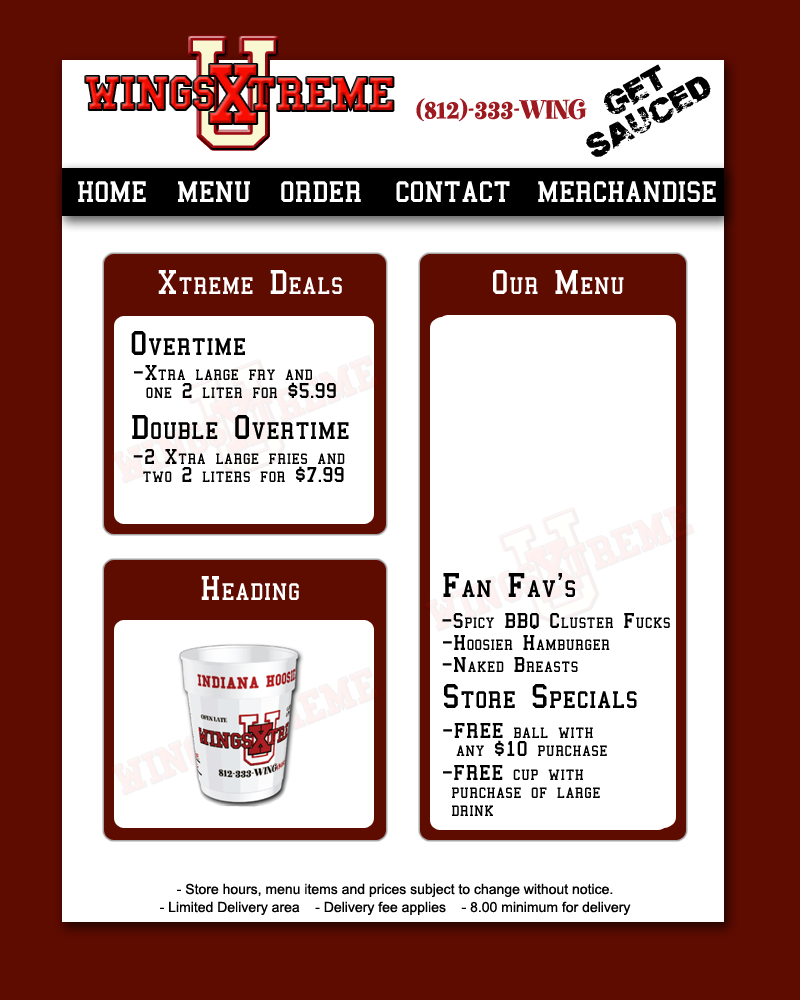
<style>
.page{position:relative;width:800px;height:1000px;background:#ffffff}
.page>*{position:absolute;margin:0}
.t1{font:87.5px "CollegeBold"}
.t2{font:47px/29px "Pdrpt";color:#000000;text-transform:uppercase}
.t3{font:50px "CollegeBold";letter-spacing:-0.05em}
.t4{font:30px "SpumoniLP";color:#9d1a20;text-transform:uppercase}
.t5{font:30px "College";color:#ffffff;text-transform:uppercase}
.t6{font:35px "College";letter-spacing:0.025em;color:#ffffff;font-variant:small-caps}
.t7{font:35px "College";letter-spacing:0.025em;color:#000000;font-variant:small-caps}
.t8{font:22px/18px "College";letter-spacing:0.025em;color:#000000;font-variant:small-caps}
.t9{font:22px "College";letter-spacing:0.025em;color:#000000;font-variant:small-caps}
.t10{font:14px/18px "ArialMT";color:#000000}
</style>
<div class="page">
<p class="t1" style="left:209px;top:64px;width:49px;height:60px">X</p>
<p class="t2" style="left:586px;top:64px;width:125px;height:93px;text-align:center;rotate:-29deg">GET<br>SAUCED</p>
<p class="t3" style="left:85px;top:76px;width:129px;height:34px">WINGS</p>
<p class="t3" style="left:247px;top:77px;width:147px;height:34px">TREME</p>
<p class="t4" style="left:416px;top:98px;width:171px;height:24px">(812)-333-WING</p>
<p class="t5" style="left:78px;top:181px;width:68px;height:21px">Home</p>
<p class="t5" style="left:178px;top:181px;width:72px;height:21px">Menu</p>
<p class="t5" style="left:281px;top:181px;width:80px;height:21px">order</p>
<p class="t5" style="left:396px;top:181px;width:114px;height:21px">contact</p>
<p class="t5" style="left:538px;top:181px;width:178px;height:21px">merchandise</p>
<p class="t6" style="left:158px;top:270px;width:184px;height:24px">Xtreme Deals</p>
<p class="t6" style="left:493px;top:270px;width:131px;height:24px">Our Menu</p>
<p class="t7" style="left:131px;top:331px;width:114px;height:24px">Overtime</p>
<p class="t8" style="left:134px;top:365px;width:202px;height:33px;text-align:center">-Xtra large fry and<br>    one 2 liter for $5.99</p>
<p class="t7" style="left:132px;top:415px;width:217px;height:24px">Double Overtime</p>
<p class="t8" style="left:133px;top:449px;width:212px;height:33px;text-align:center">-2 Xtra large fries and<br> two 2 liters for $7.99</p>
<p class="t6" style="left:201px;top:576px;width:98px;height:24px">Heading</p>
<p class="t7" style="left:443px;top:573px;width:132px;height:24px">Fan Fav's</p>
<p class="t9" style="left:442px;top:613px;width:228px;height:16px">-Spicy BBQ Cluster Fucks</p>
<p class="t9" style="left:443px;top:635px;width:167px;height:15px">-Hoosier Hamburger</p>
<p class="t9" style="left:442px;top:657px;width:136px;height:15px">-Naked Breasts</p>
<p class="t7" style="left:444px;top:684px;width:193px;height:24px">Store Specials</p>
<p class="t8" style="left:443px;top:723px;width:164px;height:33px;text-align:center">-FREE ball with<br>   any $10 purchase</p>
<p class="t8" style="left:443px;top:765px;width:157px;height:51px">-FREE cup with<br> purchase of large<br> drink</p>
<p class="t10" style="left:160px;top:883px;width:471px;height:32px;text-align:center">- Store hours, menu items and prices subject to change without notice.<br>- Limited Delivery area    - Delivery fee applies    - 8.00 minimum for delivery</p>
</div>
